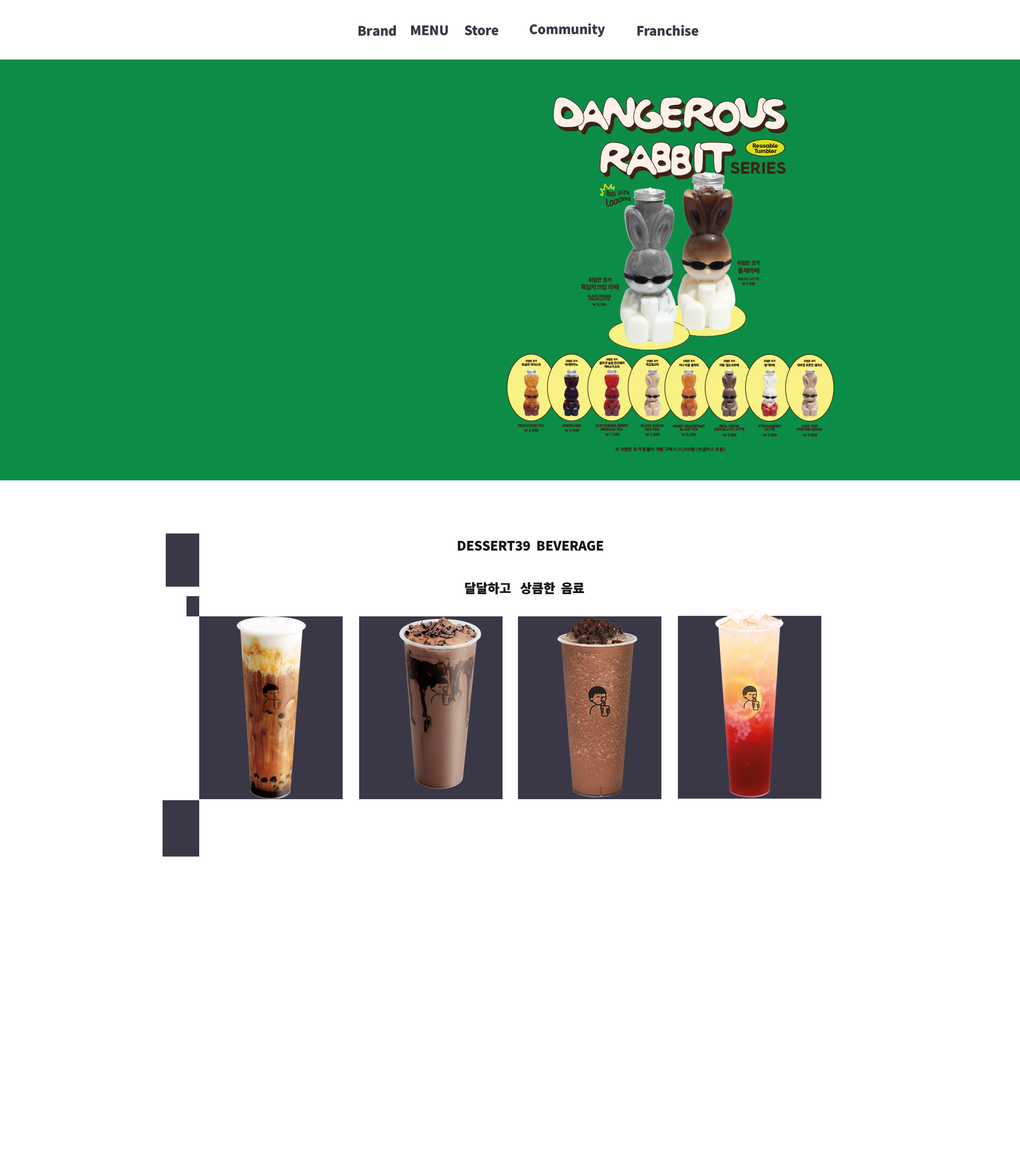
<style>
.page{position:relative;width:1020px;height:1169px;background:#ffffff}
.page>*{position:absolute;margin:0}
.t1{font:12.8px "NotoSansKR-Black";color:#3a3846}
.t2{font:12.8px "NotoSansKR-Black";color:#191515}
</style>
<div class="page">
<p class="t1" style="left:358px;top:25px;width:38px;height:11px">Brand</p>
<p class="t1" style="left:411px;top:25px;width:37px;height:11px">MENU</p>
<p class="t1" style="left:464px;top:25px;width:34px;height:11px">Store</p>
<p class="t1" style="left:530px;top:23px;width:75px;height:14px">Community</p>
<p class="t1" style="left:637px;top:24px;width:62px;height:12px">Franchise</p>
<p class="t2" style="left:457px;top:540px;width:147px;height:11px">DESSERT39  BEVERAGE</p>
<p class="t2" style="left:465px;top:582px;width:119px;height:13px">달달하고   상큼한  음료</p>
</div>
